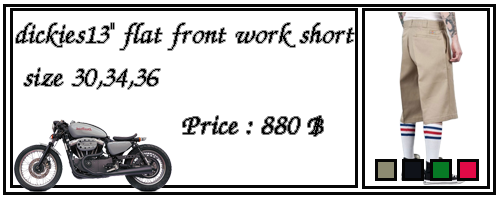
<style>
.page{position:relative;width:500px;height:200px;background:#ffffff}
.page>*{position:absolute;margin:0}
.t1{font:36px "DSUMonTaNa";color:#050505}
</style>
<div class="page">
<p class="t1" style="left:16px;top:23px;width:338px;height:66px">dickies13" flat front work short<br> size 30,34,36</p>
<p class="t1" style="left:183px;top:116px;width:140px;height:20px">Price : 880 ฿</p>
</div>
